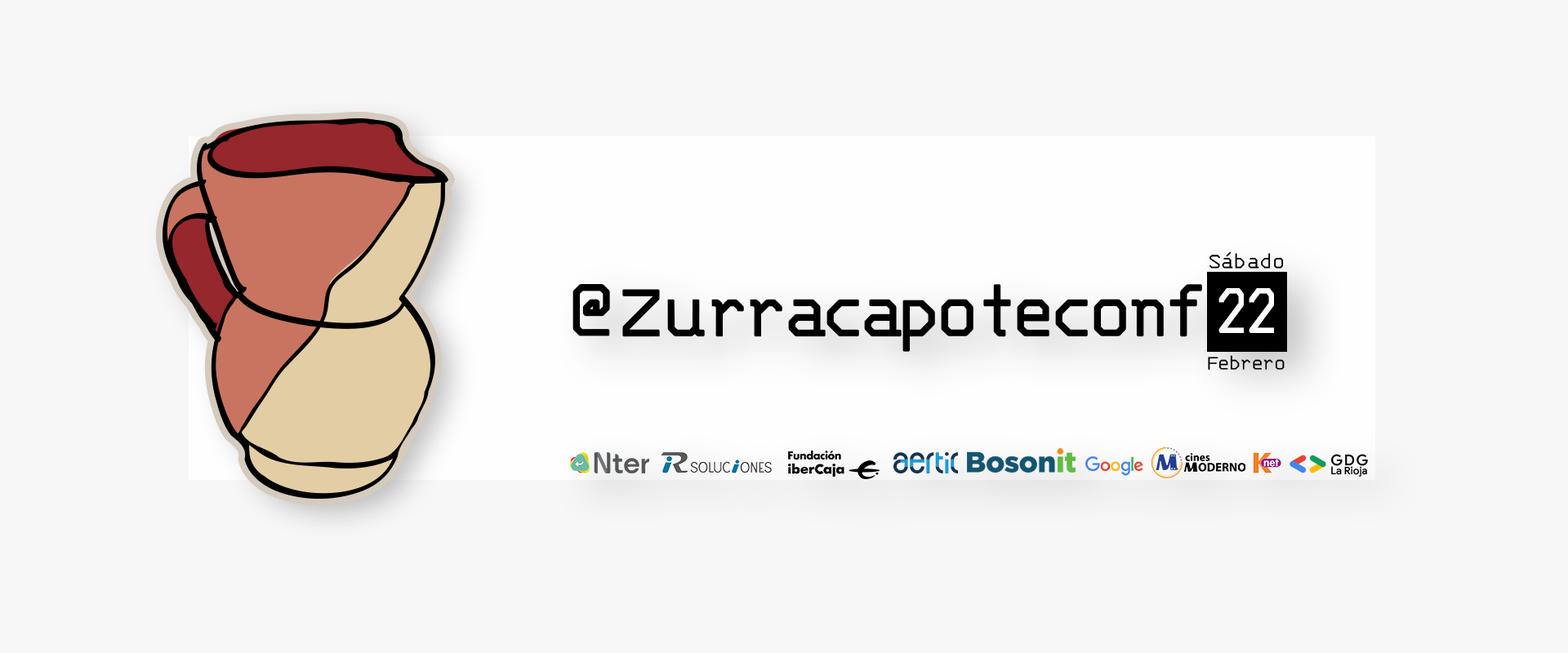
<style>
.page{position:relative;width:1568px;height:653px;background:#f7f7f7}
.page>*{position:absolute;margin:0}
.t1{font:24.1px "3270Medium";color:#000000}
.t2{font:82.4px "3270Medium";letter-spacing:-0.1em;color:#000000;font-weight:bold}
.t3{font:82.4px "3270Medium";letter-spacing:0.04em;color:#000000;font-weight:bold}
.t4{font:82.4px "3270Medium";letter-spacing:-0.02em;color:#000000;font-weight:bold}
.t5{font:71.9px "3270Medium";color:#ffffff;font-weight:bold;scale:0.76 1}
.t6{font:22.6px "3270Medium";letter-spacing:-0.04em;color:#000000}
</style>
<div class="page">
<p class="t1" style="left:1209px;top:252px;width:75px;height:17px">Sábado</p>
<p class="t2" style="left:572px;top:284px;width:630px;height:68px"><span class="t3">@</span><span class="t4">Zu</span>rracapoteconf</p>
<p class="t5" style="left:1218px;top:288px;width:56px;height:45px">22</p>
<p class="t6" style="left:1208px;top:355px;width:77px;height:15px">Febrero</p>
</div>
